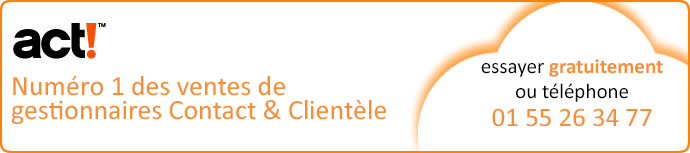
<style>
.page{position:relative;width:690px;height:153px;background:#ffffff}
.page>*{position:absolute;margin:0}
.t1{font:27px/28px "Calibri";color:#f98d32}
.t2{font:21px/24px "Calibri";color:#000000}
.t3{font:21px/24px "Calibri-Bold";color:#f98d32}
.t4{font:21px/25px "Calibri";color:#000000}
.t5{font:28px/24px "Calibri";color:#f98d32}
</style>
<div class="page">
<p class="t1" style="left:481px;top:59px;width:182px;height:68px;text-align:center"><span class="t2">essayer </span><span class="t3">gratuitement<br></span><span class="t4">ou téléphone<br></span>01 55 26 34 77</p>
<p class="t5" style="left:11px;top:75px;width:375px;height:49px">Numéro 1 des ventes de gestionnaires Contact &amp; Clientèle</p>
</div>
